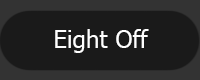
<style>
.page{position:relative;width:200px;height:80px;background:#1a1a1a}
.page>*{position:absolute;margin:0}
.t1{font:24px "Tahoma";color:#ffffff}
</style>
<div class="page">
<p class="t1" style="left:55px;top:29px;width:94px;height:24px">Eight Off</p>
</div>
